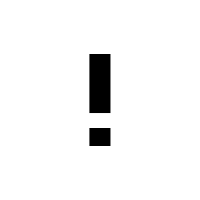
<style>
.page{position:relative;width:200px;height:200px;background:#ffffff}
.page>*{position:absolute;margin:0}
.t1{font:129px "Roboto-Black";color:#000000}
</style>
<div class="page">
<p class="t1" style="left:89px;top:54px;width:22px;height:92px">!</p>
</div>
